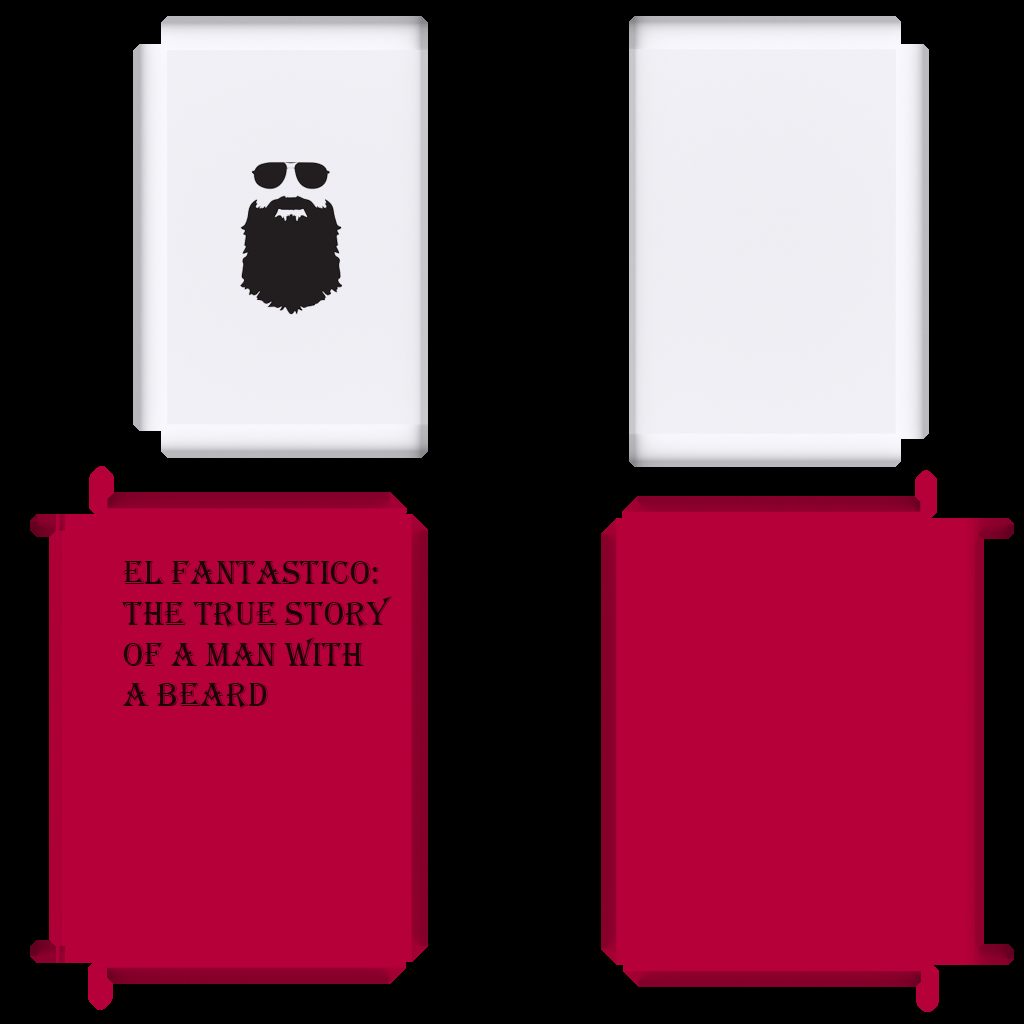
<style>
.page{position:relative;width:1024px;height:1024px;background:#000000}
.page>*{position:absolute;margin:0}
.t1{font:34px "Algerian";color:#1a0007}
</style>
<div class="page">
<p class="t1" style="left:122px;top:561px;width:270px;height:148px">EL FANTASTICO: <br>THE TRUE STORY <br>OF A MAN WITH <br>A BEARD</p>
</div>
